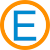
<style>
.page{position:relative;width:50px;height:50px;background:#ffffff}
.page>*{position:absolute;margin:0}
.t1{font:41.7px "ArialMT";color:#008acf}
</style>
<div class="page">
<p class="t1" style="left:13px;top:10px;width:24px;height:31px">E</p>
</div>
